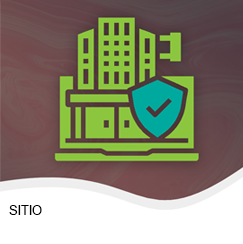
<style>
.page{position:relative;width:243px;height:244px}
.page>*{position:absolute;margin:0}
.t1{font:12.6px "ArialMT";color:#000000}
</style>
<div class="page">
<p class="t1" style="left:9px;top:205px;width:33px;height:10px">SITIO</p>
</div>
